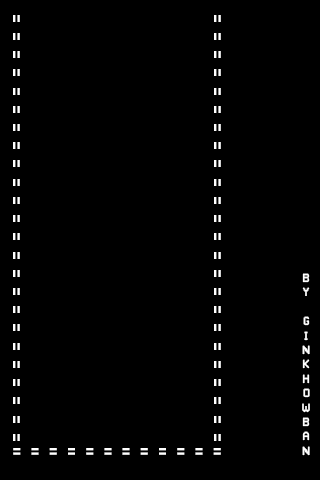
<style>
.page{position:relative;width:320px;height:480px;background:#000000}
.page>*{position:absolute;margin:0}
.t1{font:18.1px "Pixellari";letter-spacing:0.1em;color:#ffffff}
.t2{font:12px "Pixellari";letter-spacing:0.1em;color:#ffffff}
.t3{font:18px "Pixellari";letter-spacing:0.1em;color:#ffffff}
</style>
<div class="page">
<p class="t1" style="left:13px;top:15px;width:7px;height:426px;rotate:90deg">= = = = = = = = = = = = = = = = = = = = = = = =</p>
<p class="t1" style="left:214px;top:15px;width:7px;height:426px;rotate:90deg">= = = = = = = = = = = = = = = = = = = = = = = =</p>
<p class="t2" style="left:302px;top:273px;width:8px;height:183px;text-align:center">B<br>Y<br><br>G<br>I<br>N<br>K<br>H<br>O<br>W<br>B<br>A<br>N</p>
<p class="t3" style="left:13px;top:448px;width:208px;height:7px">= = = = = = = = = = = =</p>
</div>
